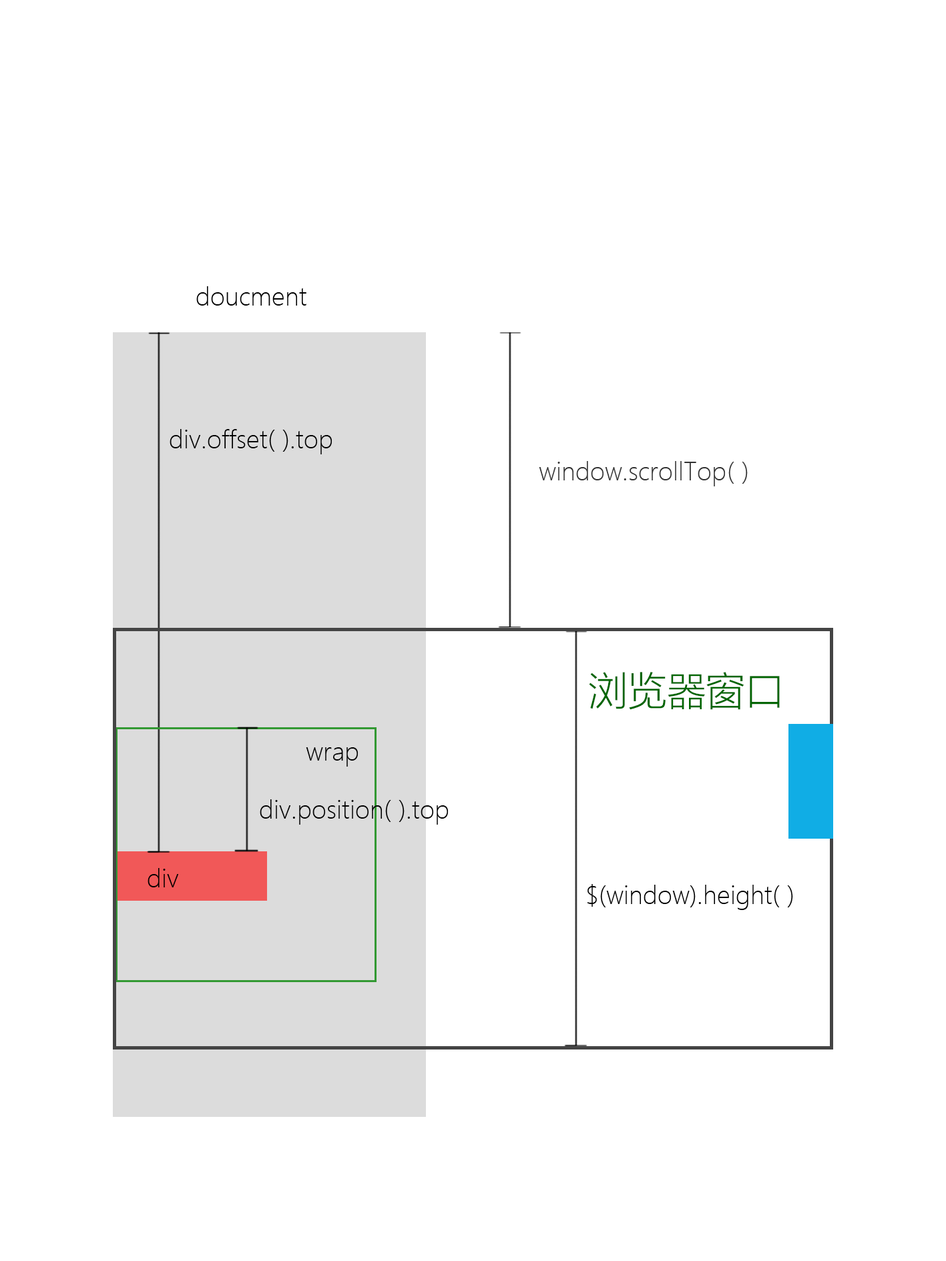
<style>
.page{position:relative;width:946px;height:1261px;background:#ffffff}
.page>*{position:absolute;margin:0}
.t1{font:24px "MicrosoftYaHeiLight";color:#000000}
.t2{font:24px "MicrosoftYaHeiLight";color:#333333}
.t3{font:39.5px "MicrosoftYaHeiLight";color:#006600}
</style>
<div class="page">
<p class="t1" style="left:196px;top:286px;width:110px;height:20px">doucment</p>
<p class="t1" style="left:169px;top:429px;width:163px;height:25px">div.offset( ).top</p>
<p class="t2" style="left:538px;top:461px;width:209px;height:25px">window.scrollTop( )</p>
<p class="t3" style="left:589px;top:672px;width:190px;height:38px">浏览器窗口</p>
<p class="t1" style="left:306px;top:747px;width:52px;height:20px">wrap</p>
<p class="t1" style="left:260px;top:799px;width:188px;height:26px">div.position( ).top</p>
<p class="t1" style="left:147px;top:868px;width:32px;height:19px">div</p>
<p class="t1" style="left:587px;top:884px;width:206px;height:26px">$(window).height( )</p>
</div>
